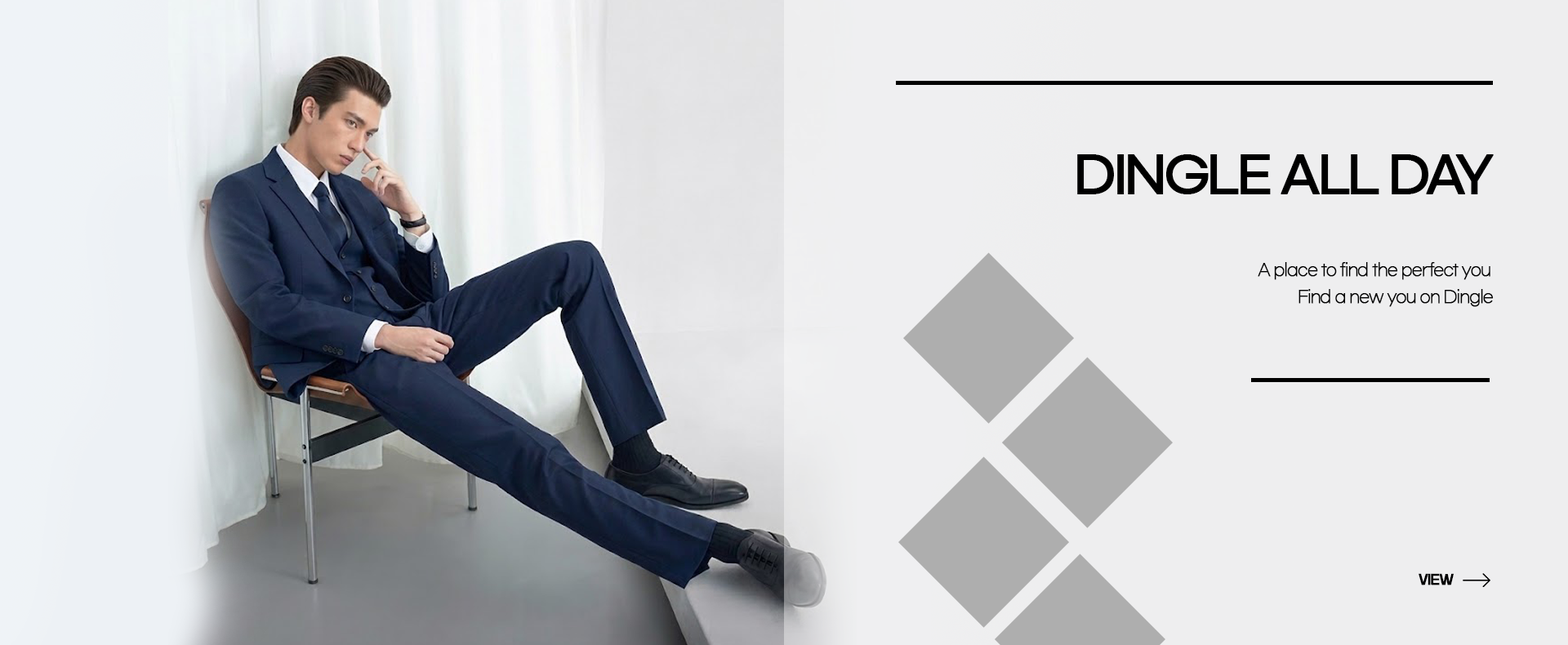
<style>
.page{position:relative;width:1568px;height:645px;background:#eeeeef}
.page>*{position:absolute;margin:0}
.t1{font:49px "GmarketSansTTFMedium";letter-spacing:-0.08em;color:#000000;font-weight:bold}
.t2{font:16.3px "GmarketSansTTFLight";letter-spacing:-0.08em;color:#000000;font-weight:bold}
.t3{font:12.2px "KBLJump_BTTF";letter-spacing:-0.025em;color:#000000;font-weight:bold}
</style>
<div class="page">
<p class="t1" style="left:1077px;top:154px;width:417px;height:40px">DINGLE ALL DAY</p>
<p class="t2" style="left:1258px;top:262px;width:232px;height:18px">A place to find the perfect you</p>
<p class="t2" style="left:1298px;top:289px;width:196px;height:18px">Find a new you on Dingle</p>
<p class="t3" style="left:1419px;top:573px;width:35px;height:13px">VIEW</p>
</div>
